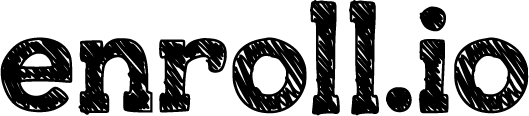
<style>
.page{position:relative;width:529px;height:116px;background:#ffffff}
.page>*{position:absolute;margin:0}
.t1{font:145px "SlabThing";letter-spacing:-0.02em;color:#000000}
.t2{font:145px "SlabThing";letter-spacing:-0.06em;color:#000000}
.t3{font:145px "SlabThing";letter-spacing:-0.04em;color:#000000}
.t4{font:145px "SlabThing";color:#000000}
</style>
<div class="page">
<p class="t1" style="left:0px;top:0px;width:529px;height:116px">en<span class="t2">r</span><span class="t3">o</span><span class="t4">l</span><span class="t2">l</span>.<span class="t2">i</span><span class="t4">o</span></p>
</div>
